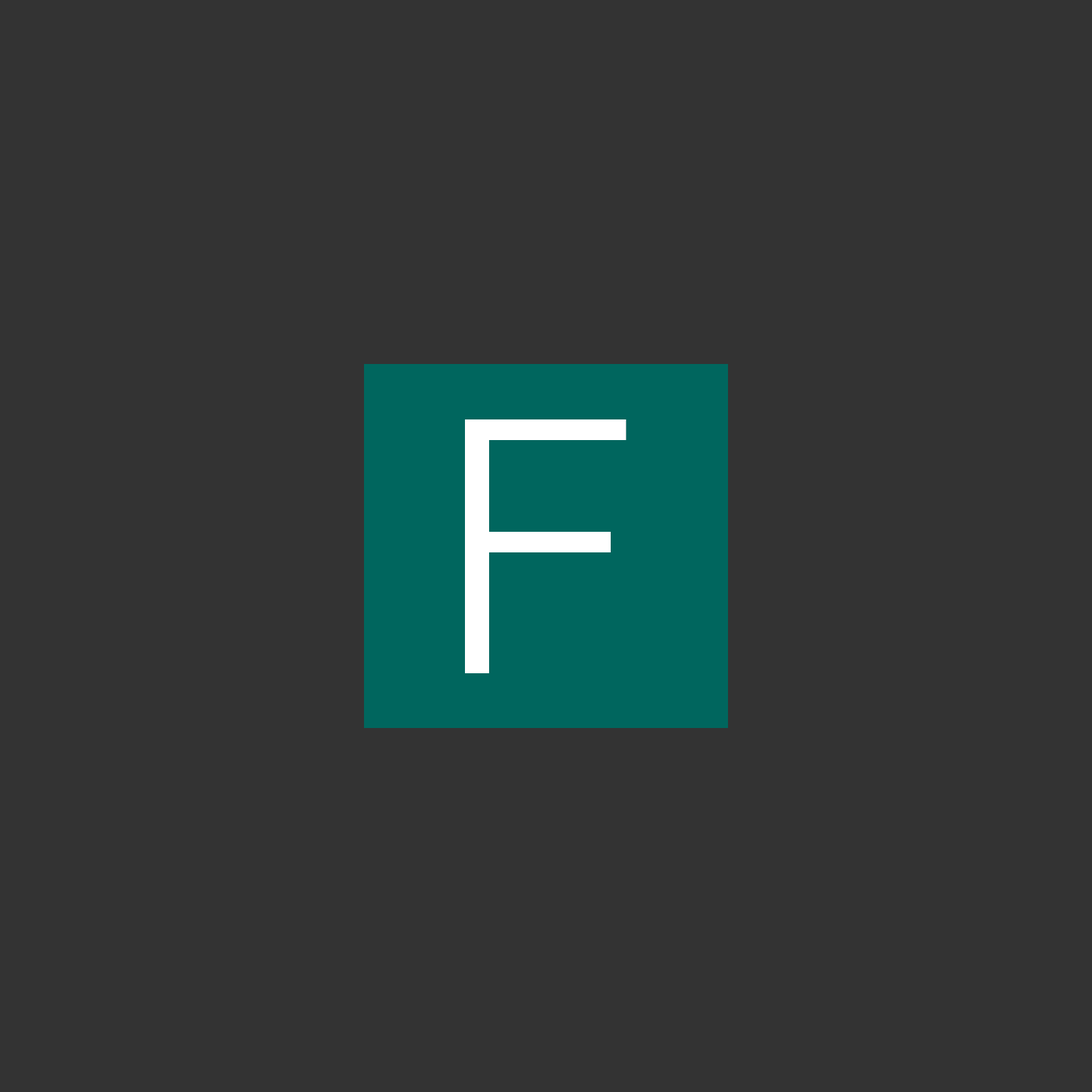
<style>
.page{position:relative;width:1092px;height:1092px;background:#333333}
.page>*{position:absolute;margin:0}
.t1{font:355.5px "HelveticaNeue-Light";letter-spacing:0.04em;color:#ffffff}
</style>
<div class="page">
<p class="t1" style="left:465px;top:419px;width:161px;height:254px">F</p>
</div>
